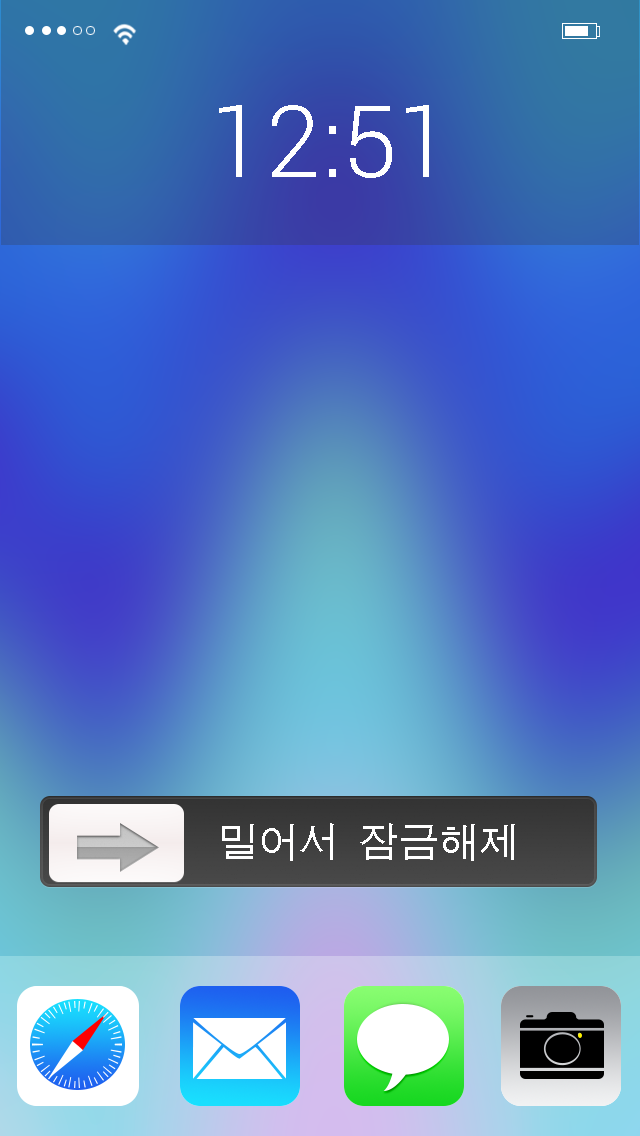
<style>
.page{position:relative;width:640px;height:1136px}
.page>*{position:absolute;margin:0}
.t1{font:100px "Roboto-Light";color:#ffffff}
.t2{font:40px "ÈÞ¸Õ°íµñ";color:#ffffff}
</style>
<div class="page">
<p class="t1" style="left:219px;top:105px;width:210px;height:73px">12:51</p>
<p class="t2" style="left:222px;top:823px;width:293px;height:38px">밀어서 잠금해제</p>
</div>
